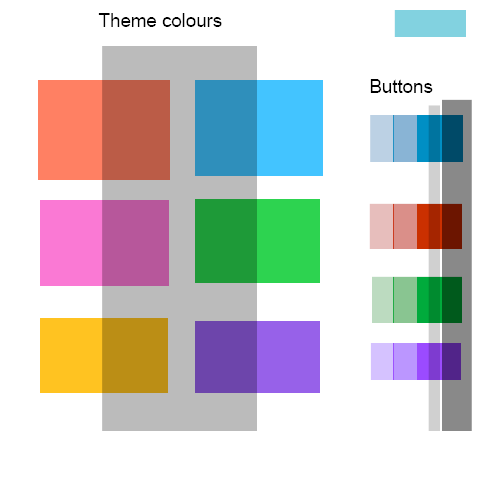
<style>
.page{position:relative;width:480px;height:480px;background:#ffffff}
.page>*{position:absolute;margin:0}
.t1{font:18.7px "ArialMT";color:#000000}
</style>
<div class="page">
<p class="t1" style="left:98px;top:13px;width:124px;height:14px">Theme colours</p>
<p class="t1" style="left:370px;top:79px;width:63px;height:14px">Buttons</p>
</div>
